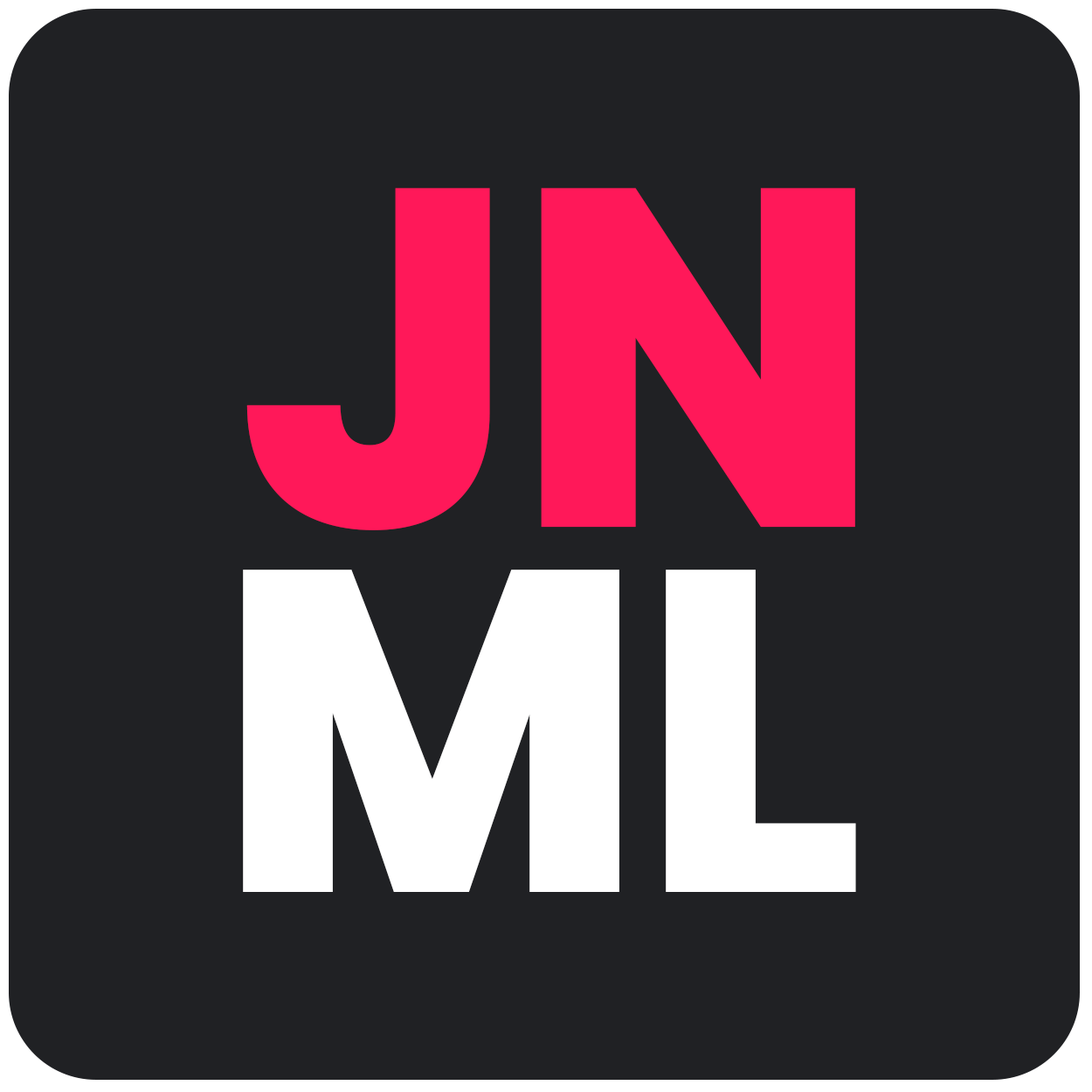
<style>
.page{position:relative;width:1092px;height:1092px;background:#202124}
.page>*{position:absolute;margin:0}
.t1{font:480.2px "Poppins-ExtraBold";letter-spacing:-0.01em;color:#ff1859}
.t2{font:457px "Poppins-ExtraBold";letter-spacing:-0.01em;color:#ffffff}
</style>
<div class="page">
<p class="t1" style="left:246px;top:188px;width:609px;height:342px">JN</p>
<p class="t2" style="left:243px;top:570px;width:613px;height:322px">ML</p>
</div>
